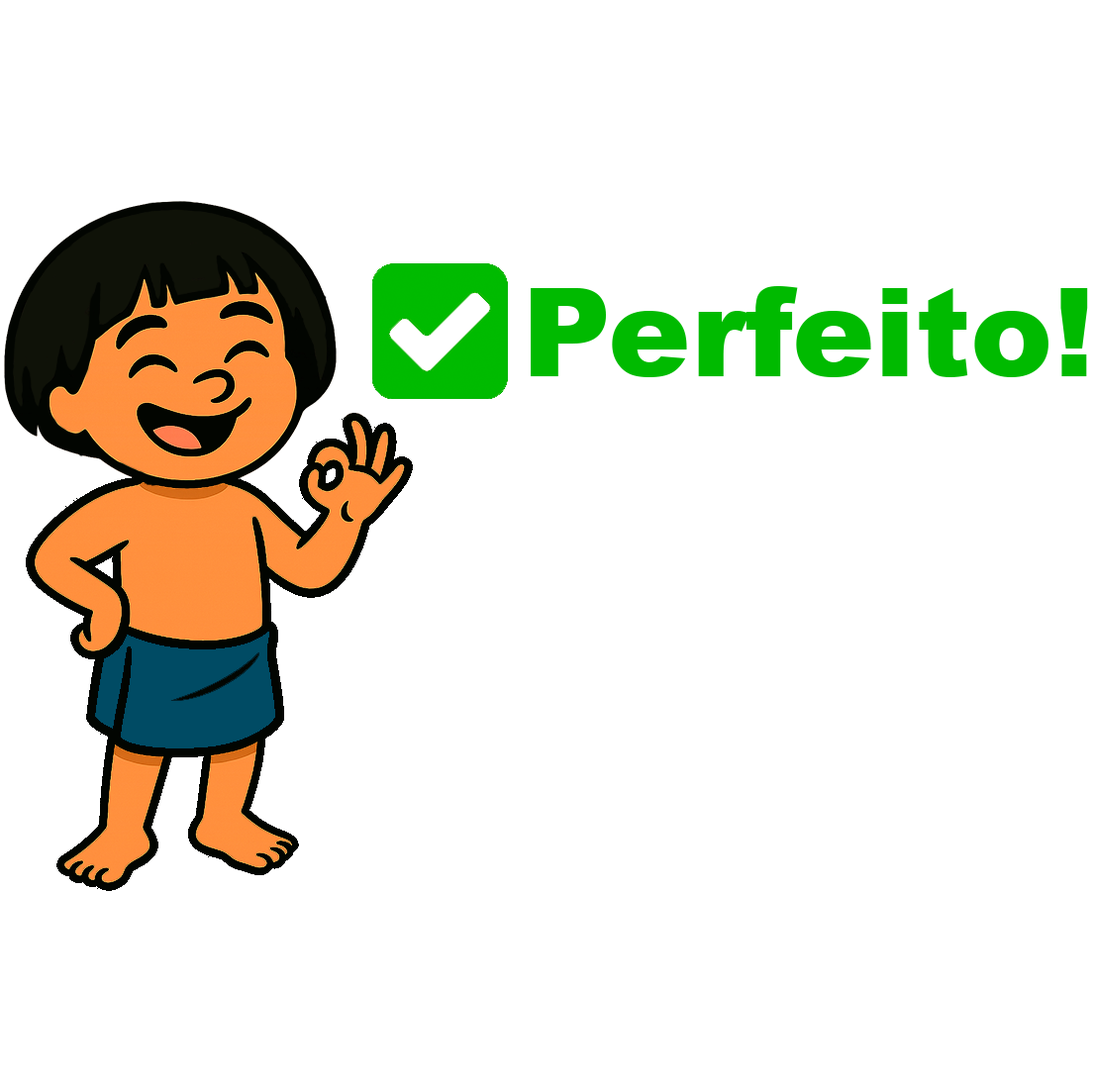
<style>
.page{position:relative;width:1094px;height:1090px;background:#ffffff}
.page>*{position:absolute;margin:0}
.t1{font:123.8px "Arial-Black";color:#00ba00}
</style>
<div class="page">
<p class="t1" style="left:531px;top:286px;width:557px;height:91px">Perfeito!</p>
</div>
